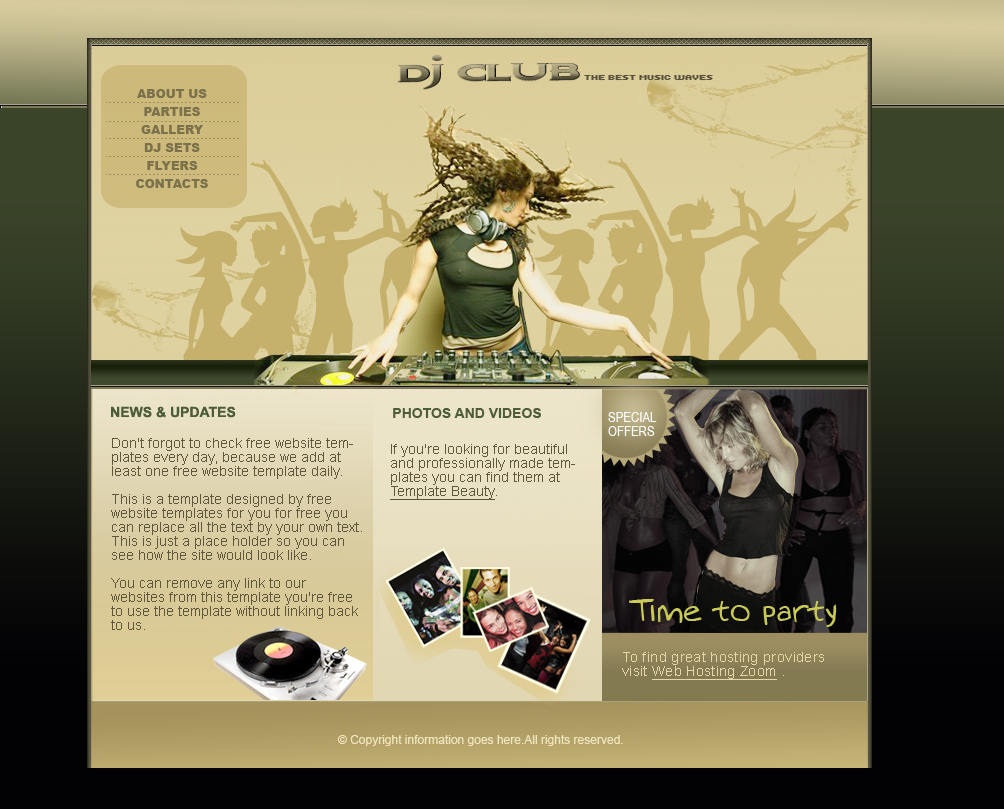
<style>
.page{position:relative;width:1004px;height:809px}
.page>*{position:absolute;margin:0}
.t1{font:24px "BonJovi"}
.t2{font:8px "Kroeger0563";color:#59533d}
.t3{font:12px/18px "Arial-Black";color:#7b714a}
.t4{font:14px "Arial-BoldMT";color:#4c5b38}
.t5{font:14px "Arial-BoldMT";color:#4d5c3a;text-transform:uppercase}
.t6{font:14px/14px "ArialNarrow";color:#ffffff}
.t7{font:14px/14px "ArialMT";color:#5e573b}
.t8{font:14px/14px "ArialMT";color:#5e573b;text-decoration:underline}
.t9{font:30px "Augie";color:#c9ca56}
.t10{font:14px/14px "ArialMT";letter-spacing:0.025em;color:#e5d7a7}
.t11{font:14px/14px "ArialMT";letter-spacing:0.025em;color:#e5d7a7;text-decoration:underline}
.t12{font:12px "ArialMT";color:#f1e6c0}
</style>
<div class="page">
<p class="t1" style="left:398px;top:63px;width:182px;height:26px;rotate:-1deg">Dj  Club</p>
<p class="t2" style="left:584px;top:74px;width:129px;height:7px">THE BEST MUSIC WAVES</p>
<p class="t3" style="left:136px;top:89px;width:72px;height:99px;text-align:center">ABOUT US<br>PARTIES<br>GALLERY<br>DJ SETS<br>FLYERS<br>CONTACTS</p>
<p class="t4" style="left:111px;top:406px;width:125px;height:12px">NEWS &amp; UPDATES</p>
<p class="t5" style="left:393px;top:408px;width:148px;height:10px">PHOTOS and VIDEOS</p>
<p class="t6" style="left:608px;top:412px;width:49px;height:24px">SPECIAL<br>OFFERS</p>
<p class="t7" style="left:111px;top:438px;width:251px;height:192px">Don't forgot to check free website templates every day, because we add at least one free website template daily.<br><br>This is a template designed by free website templates for you for free you can replace all the text by your own text. This is just a place holder so you can see how the site would look like.<br><br>You can remove any link to our websites from this template you're free to use the template without linking back to us.</p>
<p class="t7" style="left:390px;top:444px;width:185px;height:56px">If you're looking for beautiful and professionally made templates you can find them at <span class="t8">Template Beauty</span>.<br><br>To find great hosting providers visit Web Hosting Zoom</p>
<p class="t9" style="left:629px;top:599px;width:208px;height:28px">Time to party</p>
<p class="t10" style="left:622px;top:652px;width:202px;height:28px">To find great hosting providers visit <span class="t11">Web Hosting Zoom</span> .</p>
<p class="t12" style="left:337px;top:735px;width:286px;height:11px">© Copyright information goes here.All rights reserved.</p>
</div>
